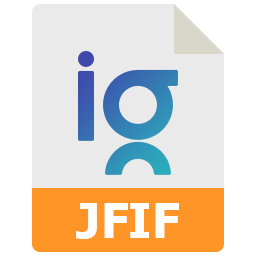
<style>
.page{position:relative;width:256px;height:256px;background:#eaeaea}
.page>*{position:absolute;margin:0}
.t1{font:48px "Tahoma-Bold";color:#ffffff}
</style>
<div class="page">
<p class="t1" style="left:76px;top:203px;width:103px;height:36px">JFIF</p>
</div>
